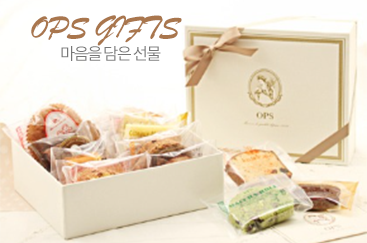
<style>
.page{position:relative;width:367px;height:243px}
.page>*{position:absolute;margin:0}
.t1{font:33.3px "BrushScriptMT";letter-spacing:-0.05em;color:#a9764d;text-transform:uppercase}
.t2{font:16.7px "NotoSansKR-Regular";letter-spacing:-0.1em;color:#777777;text-transform:uppercase}
</style>
<div class="page">
<p class="t1" style="left:31px;top:15px;width:151px;height:31px">ops GIFTS</p>
<p class="t2" style="left:61px;top:46px;width:100px;height:15px">마음을 담은 선물</p>
</div>
